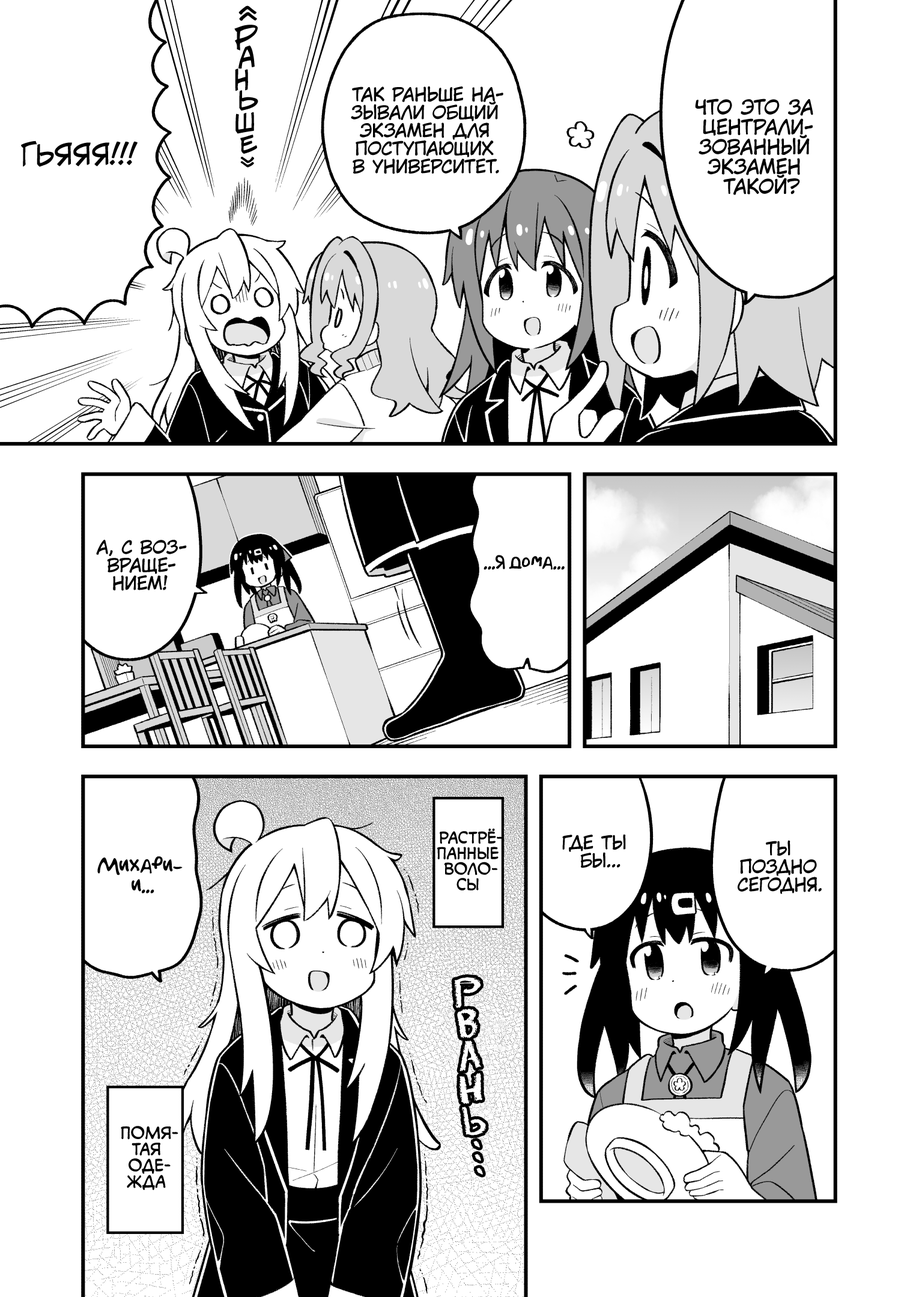
<style>
.page{position:relative;width:919px;height:1297px;background:#ffffff}
.page>*{position:absolute;margin:0}
.t1{font:28.8px "KuraiVoice2";color:#000000;text-transform:uppercase}
.t2{font:28.8px "v_CCJeffCampbell";color:#000000;scale:1.1 1}
.t3{font:27.6px "v_CCJeffCampbell";color:#000000;scale:1.05 1}
.t4{font:26.4px "v_CCJeffCampbell";color:#000000}
.t5{font:18px "KuraiVoice2";color:#000000;text-transform:uppercase}
.t6{font:25.2px "v_CCJeffCampbell";color:#000000}
.t7{font:19.8px "KuraiVoice2";color:#000000;text-transform:uppercase}
.t8{font:24px "v_CCJeffCampbell";color:#000000}
.t9{font:22.8px "v_CCJeffCampbell";color:#000000}
.t10{font:28.8px "v_CCJeffCampbell";color:#000000;text-transform:uppercase}
.t11{font:21.6px "KuraiVoice2";color:#000000;text-transform:uppercase}
.t12{font:18px "AkbarPlain";color:#000000}
.t13{font:15.6px "v_CCMonologous";color:#000000;text-transform:uppercase}
.t14{font:19.8px "AkbarPlain";color:#000000}
.t15{font:36px "DSEraserCyr";color:#ffffff;font-weight:bold}
.t16{font:16.2px "v_CCMonologous";color:#000000;text-transform:uppercase}
</style>
<div class="page">
<p class="t1" style="left:238px;top:5px;width:19px;height:16px;rotate:88deg">«</p>
<p class="t2" style="left:234px;top:25px;width:24px;height:25px">р</p>
<p class="t3" style="left:238px;top:45px;width:17px;height:24px">а</p>
<p class="t4" style="left:235px;top:68px;width:13px;height:23px">н</p>
<p class="t5" style="left:351px;top:86px;width:152px;height:88px;text-align:center">Так раньше на-<br>зывали общий<br>экзамен для<br>поступающих<br>в университет.</p>
<p class="t6" style="left:239px;top:90px;width:19px;height:21px">ь</p>
<p class="t7" style="left:695px;top:99px;width:118px;height:96px;text-align:center">Что это за<br>централи-<br>зованный<br>экзамен<br>такой?</p>
<p class="t8" style="left:235px;top:112px;width:19px;height:22px">ш</p>
<p class="t9" style="left:240px;top:135px;width:17px;height:19px">е</p>
<p class="t10" style="left:21px;top:141px;width:117px;height:26px">Гьяяя!!!</p>
<p class="t11" style="left:240px;top:157px;width:14px;height:11px;rotate:90deg">»</p>
<p class="t5" style="left:96px;top:539px;width:91px;height:52px;text-align:center">А, с воз-<br>враще-<br>нием!</p>
<p class="t12" style="left:484px;top:555px;width:81px;height:15px">...Я дома...</p>
<p class="t13" style="left:437px;top:828px;width:66px;height:63px;text-align:center">Растрё-<br>панные<br>воло-<br>сы</p>
<p class="t5" style="left:562px;top:834px;width:64px;height:35px;text-align:center">Где ты<br>бы...</p>
<p class="t5" style="left:738px;top:840px;width:84px;height:54px;text-align:center">Ты<br>поздно<br>сегодня.</p>
<p class="t14" style="left:97px;top:857px;width:86px;height:37px;text-align:center">Михари-<br>и...</p>
<p class="t15" style="left:454px;top:977px;width:27px;height:32px;rotate:-6deg">р</p>
<p class="t15" style="left:457px;top:1009px;width:21px;height:30px;rotate:-9deg">в</p>
<p class="t15" style="left:460px;top:1041px;width:21px;height:31px;rotate:-8deg">а</p>
<p class="t15" style="left:459px;top:1073px;width:23px;height:32px;rotate:-6deg">н</p>
<p class="t15" style="left:462px;top:1107px;width:24px;height:29px;rotate:-7deg">ь</p>
<p class="t16" style="left:121px;top:1126px;width:57px;height:65px;text-align:center">Помя-<br>тая<br>оде-<br>жда</p>
<p class="t15" style="left:473px;top:1141px;width:7px;height:7px">.</p>
<p class="t15" style="left:475px;top:1155px;width:6px;height:6px">.</p>
<p class="t15" style="left:476px;top:1168px;width:7px;height:7px">.</p>
</div>
